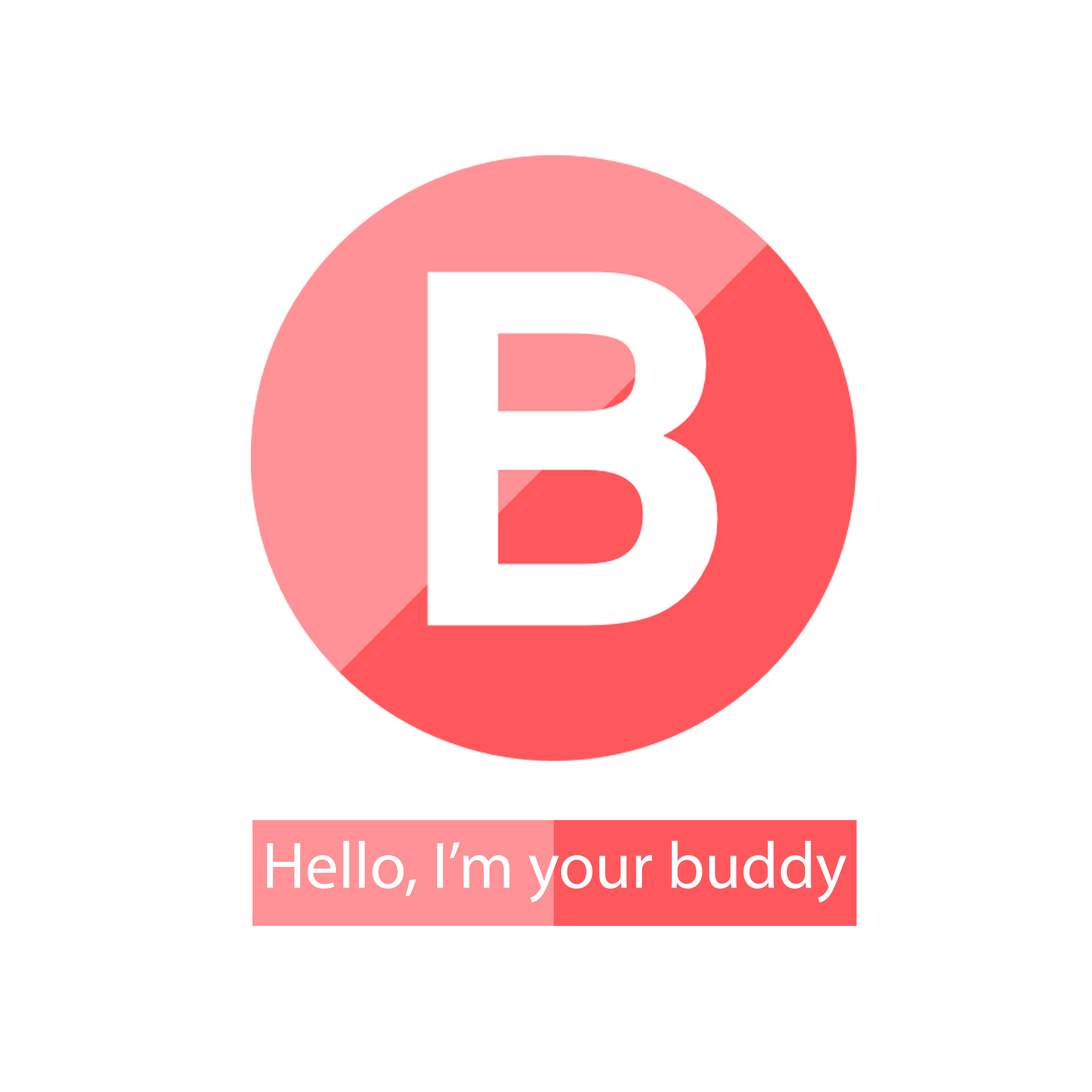
<style>
.page{position:relative;width:1092px;height:1092px;background:#ffffff}
.page>*{position:absolute;margin:0}
.t1{font:66.2px "MyriadPro-Regular";color:#ffffff}
</style>
<div class="page">
<p class="t1" style="left:267px;top:841px;width:579px;height:62px">Hello, I’m your buddy</p>
</div>
